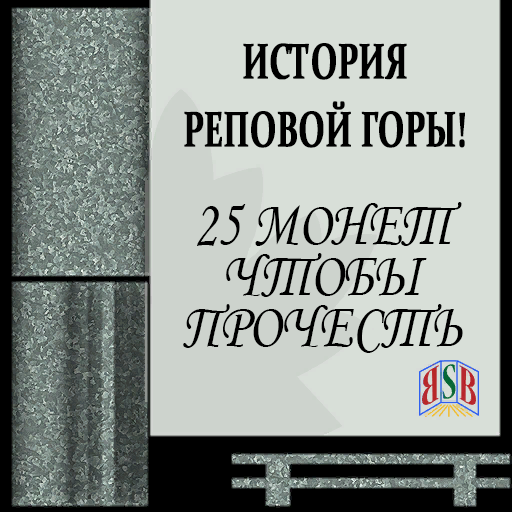
<style>
.page{position:relative;width:512px;height:512px;background:#d8dfd8}
.page>*{position:absolute;margin:0}
.t1{font:50px/68px "Constantia-Bold";color:#000000;font-weight:bold;scale:0.63 1}
.t2{font:65px/51px "MonotypeCorsiva";color:#000000;scale:0.83 1}
</style>
<div class="page">
<p class="t1" style="left:184px;top:43px;width:281px;height:105px;text-align:center">ИСТОРИЯ<br>РЕПОВОЙ ГОРЫ!</p>
<p class="t2" style="left:183px;top:202px;width:280px;height:151px;text-align:center">25 МОНЕТ<br>ЧТОБЫ<br>ПРОЧЕСТЬ</p>
</div>
